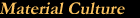
<style>
.page{position:relative;width:140px;height:18px;background:#000000}
.page>*{position:absolute;margin:0}
.t1{font:18px "Garamond-Bold";color:#fec45f;font-style:italic}
</style>
<div class="page">
<p class="t1" style="left:0px;top:2px;width:125px;height:13px">Material Culture</p>
</div>
